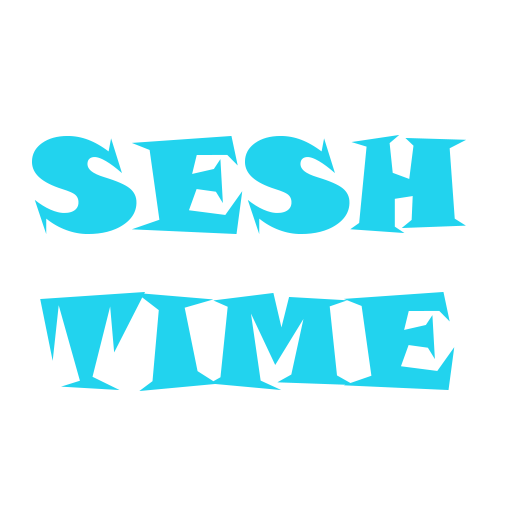
<style>
.page{position:relative;width:512px;height:512px;background:#ffffff}
.page>*{position:absolute;margin:0}
.t1{font:130px "SnapITC-Regular";color:#22d3ee}
</style>
<div class="page">
<p class="t1" style="left:32px;top:135px;width:435px;height:256px;text-align:center">SESH<br>TIME</p>
</div>
